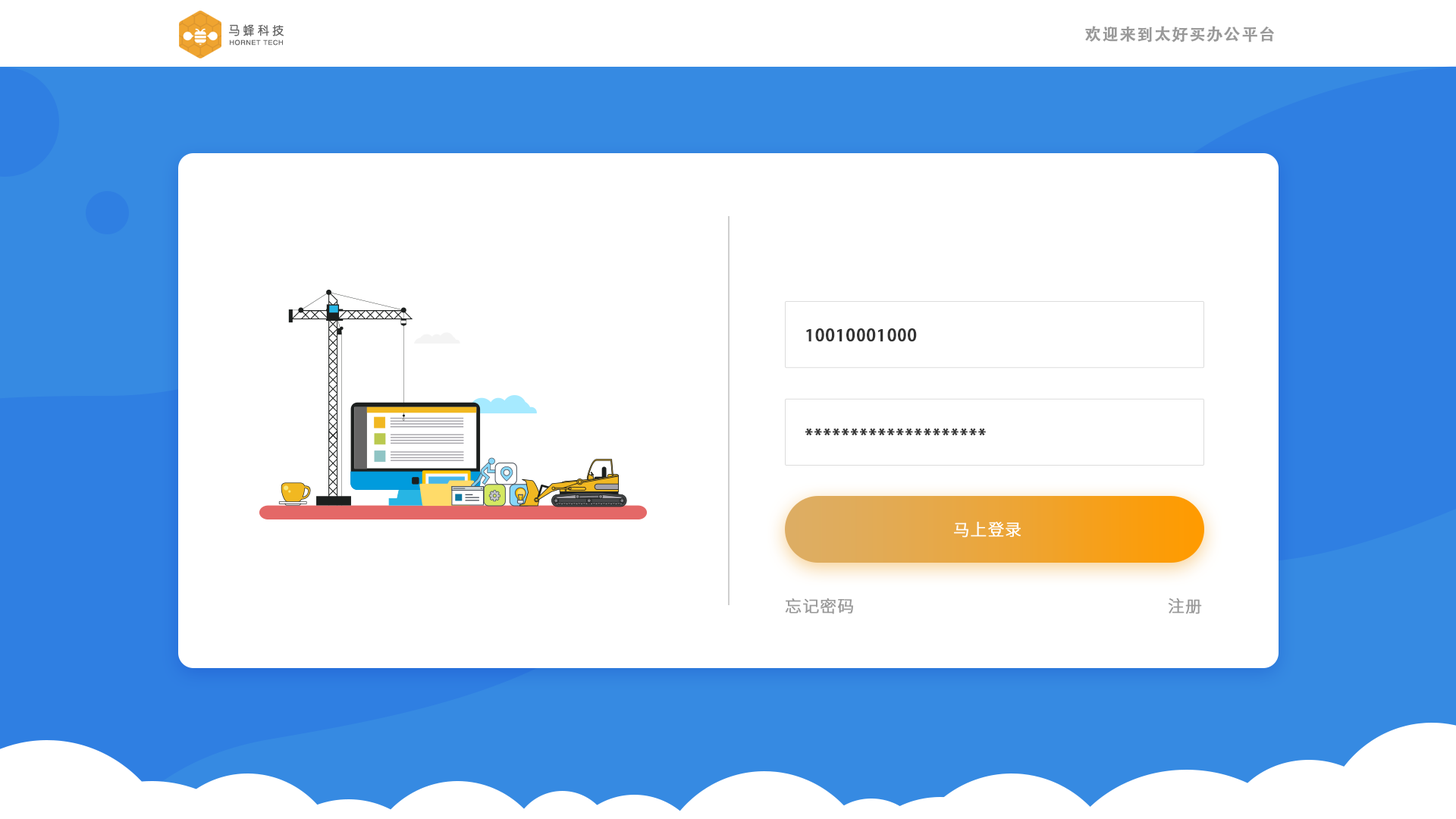
<style>
.page{position:relative;width:1456px;height:819px;background:#ffffff}
.page>*{position:absolute;margin:0}
.t1{font:12.3px "CTZhongYuanSJ";letter-spacing:0.18em;color:#666666}
.t2{font:16.2px "AdobeHeitiStd-Regular";letter-spacing:0.03em;color:#999999;font-weight:bold}
.t3{font:6.8px "CTZhongYuanSJ";letter-spacing:0.06em;color:#666666}
.t4{font:16.2px "AdobeHeitiStd-Regular";letter-spacing:0.03em;color:#333333;font-weight:bold}
.t5{font:16.2px "SourceHanSansCN-Light";letter-spacing:0.03em;color:#ffffff;font-weight:bold}
.t6{font:16.2px "SourceHanSansCN-Light";letter-spacing:0.03em;color:#999999;font-weight:bold}
</style>
<div class="page">
<p class="t1" style="left:228px;top:24px;width:56px;height:12px">马蜂科技</p>
<p class="t2" style="left:1085px;top:26px;width:189px;height:16px">欢迎来到太好买办公平台</p>
<p class="t3" style="left:230px;top:39px;width:53px;height:6px">HORNET TECH</p>
<p class="t4" style="left:806px;top:328px;width:111px;height:14px">10010001000</p>
<p class="t4" style="left:805px;top:428px;width:181px;height:7px">********************</p>
<p class="t5" style="left:954px;top:522px;width:67px;height:16px">马上登录</p>
<p class="t6" style="left:785px;top:598px;width:68px;height:16px">忘记密码</p>
<p class="t6" style="left:1168px;top:598px;width:34px;height:16px">注册</p>
</div>
